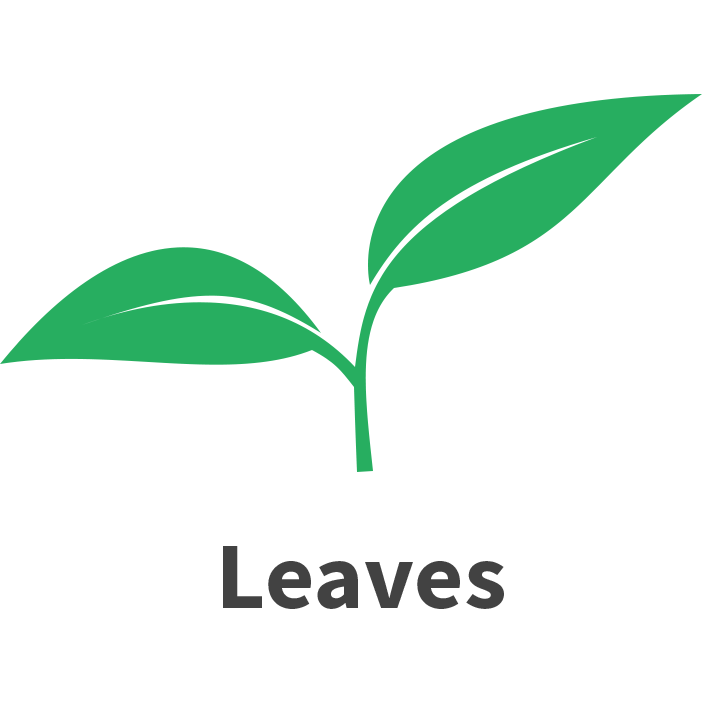
<style>
.page{position:relative;width:702px;height:702px;background:#ffffff}
.page>*{position:absolute;margin:0}
.t1{font:95px "SourceSansPro-Bold";color:#424242}
</style>
<div class="page">
<p class="t1" style="left:223px;top:546px;width:281px;height:63px">Leaves</p>
</div>
